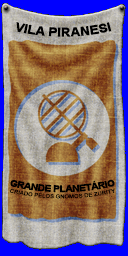
<style>
.page{position:relative;width:128px;height:256px}
.page>*{position:absolute;margin:0}
.t1{font:12px "Arial-BoldMT";color:#000000;text-transform:uppercase;scale:1.06 1}
.t2{font:9.3px "Arial-BoldMT";letter-spacing:-0.05em;color:#000000;text-transform:uppercase;scale:1.06 1}
.t3{font:5.2px "ArialMT";color:#000000;text-transform:uppercase;scale:1.12 1}
</style>
<div class="page">
<p class="t1" style="left:16px;top:22px;width:96px;height:15px">vila piranesi</p>
<p class="t2" style="left:10px;top:179px;width:105px;height:14px">Grande planetário</p>
<p class="t3" style="left:10px;top:188px;width:105px;height:11px;text-align:center">criado pelos gnomos de zurity</p>
</div>
